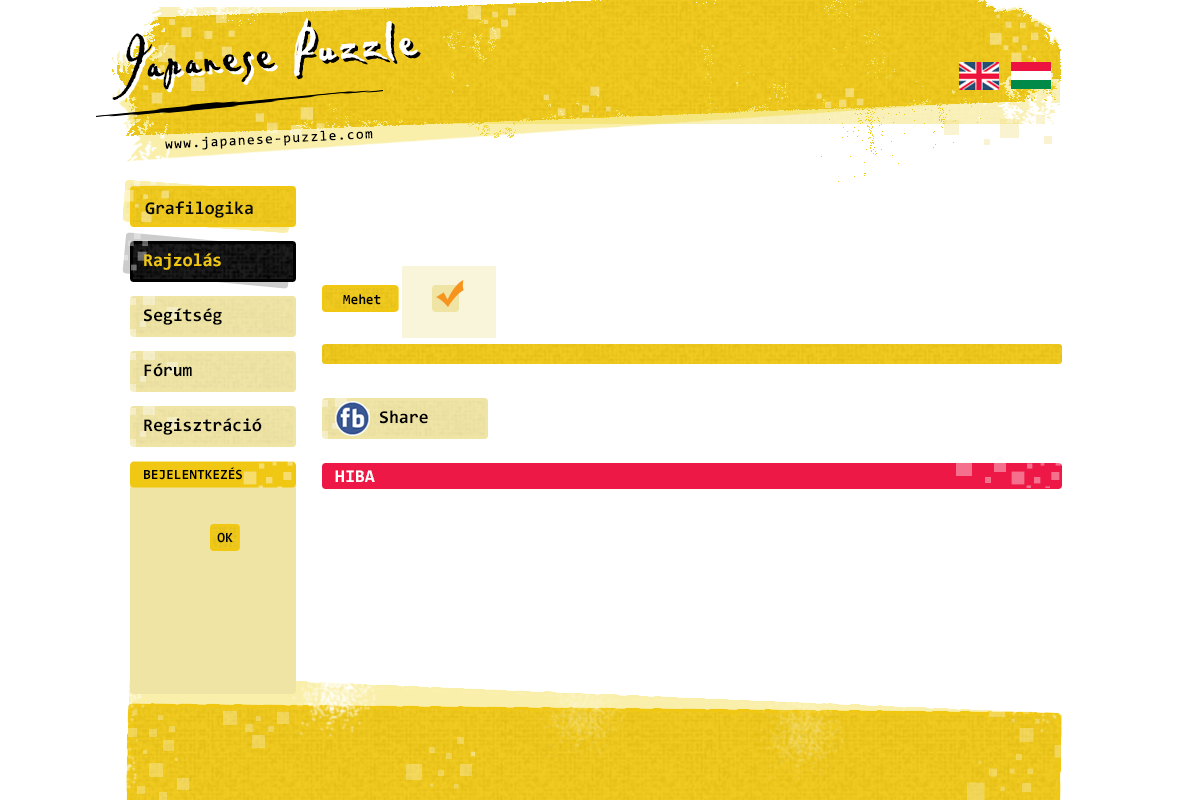
<style>
.page{position:relative;width:1200px;height:800px;background:#ffffff}
.page>*{position:absolute;margin:0}
.t1{font:60px "PabloLetPlain";letter-spacing:0.05em;color:#000000}
.t2{font:60px "PabloLetPlain";letter-spacing:0.05em;color:#ffffff}
.t3{font:14px "Consolas";letter-spacing:0.1em;color:#000000}
.t4{font:18px "Consolas-Bold";color:#0b0a0a}
.t5{font:18px "Consolas-Bold";color:#f0c814}
.t6{font:14px "Consolas-Bold";color:#000000}
.t7{font:18px "Consolas-Bold";color:#000000}
.t8{font:18px "Consolas-Bold";color:#ffffff}
</style>
<div class="page">
<p class="t1" style="left:112px;top:18px;width:306px;height:82px;rotate:-5deg">Japanese <span class="t2">Puzzle</span></p>
<p class="t2" style="left:114px;top:20px;width:306px;height:82px;rotate:-5deg">Japanese<span class="t1"> Puzzle</span></p>
<p class="t3" style="left:165px;top:130px;width:208px;height:20px;rotate:-3deg">www.japanese-puzzle.com</p>
<p class="t4" style="left:145px;top:201px;width:108px;height:17px">Grafilogika</p>
<p class="t5" style="left:144px;top:253px;width:77px;height:17px">Rajzolás</p>
<p class="t6" style="left:343px;top:294px;width:38px;height:11px">Mehet</p>
<p class="t7" style="left:144px;top:308px;width:78px;height:17px">Segítség</p>
<p class="t7" style="left:144px;top:363px;width:48px;height:14px">Fórum</p>
<p class="t7" style="left:380px;top:410px;width:48px;height:14px">Share</p>
<p class="t7" style="left:144px;top:418px;width:118px;height:17px">Regisztráció</p>
<p class="t6" style="left:144px;top:467px;width:98px;height:13px">BEJELENTKEZÉS</p>
<p class="t8" style="left:335px;top:470px;width:40px;height:12px">HIBA</p>
<p class="t6" style="left:217px;top:532px;width:16px;height:11px">OK</p>
</div>
